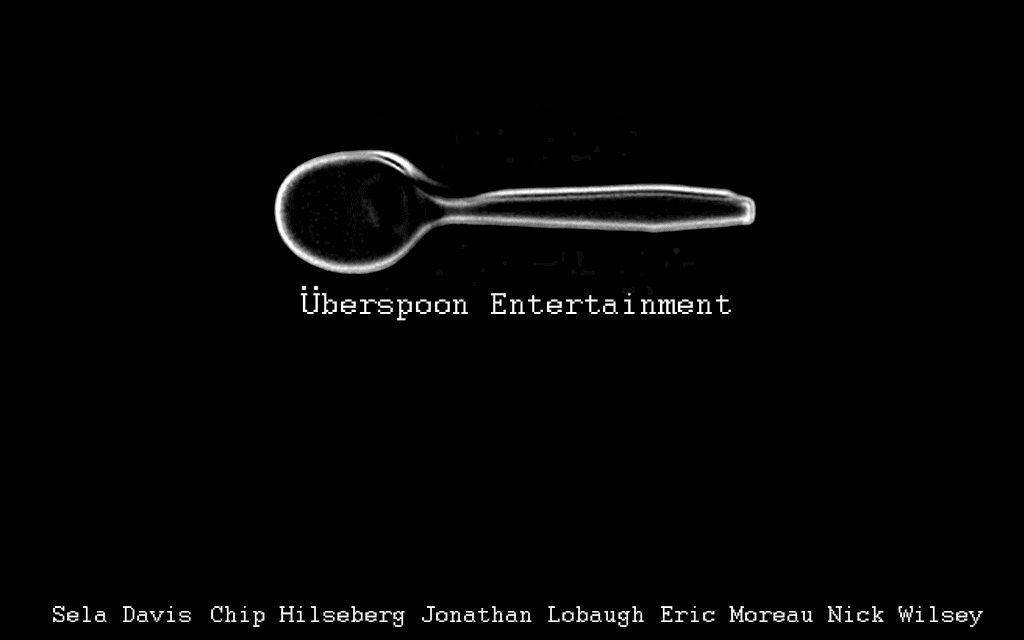
<style>
.page{position:relative;width:1024px;height:640px;background:#000000}
.page>*{position:absolute;margin:0}
.t1{font:33.3px "Courier";color:#ffffff}
.t2{font:25px "Courier";color:#ffffff}
</style>
<div class="page">
<p class="t1" style="left:300px;top:293px;width:431px;height:28px">Uberspoon Entertainment</p>
<p class="t2" style="left:53px;top:606px;width:930px;height:21px">Sela Davis  Chip Hilseberg Jonathan Lobaugh Eric Moreau Nick Wilsey</p>
</div>
